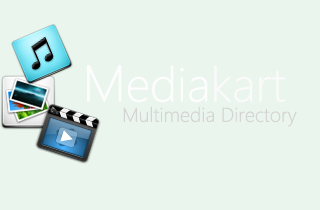
<style>
.page{position:relative;width:320px;height:210px;background:#eaf5ed}
.page>*{position:absolute;margin:0}
.t1{font:48px "SegoeWP-Light";color:#fdfdfd}
.t2{font:52px "SegoeWP-Light";color:#fdfdfd}
.t3{font:48px "SegoeWP-Light";color:#fafafa}
.t4{font:20px "SegoeWP-Light";color:#d4d4d4}
</style>
<div class="page">
<p class="t1" style="left:87px;top:65px;width:198px;height:38px"><span class="t2"> M</span>edia<span class="t3">kart</span></p>
<p class="t4" style="left:123px;top:106px;width:174px;height:21px">Multimedia Directory</p>
</div>
